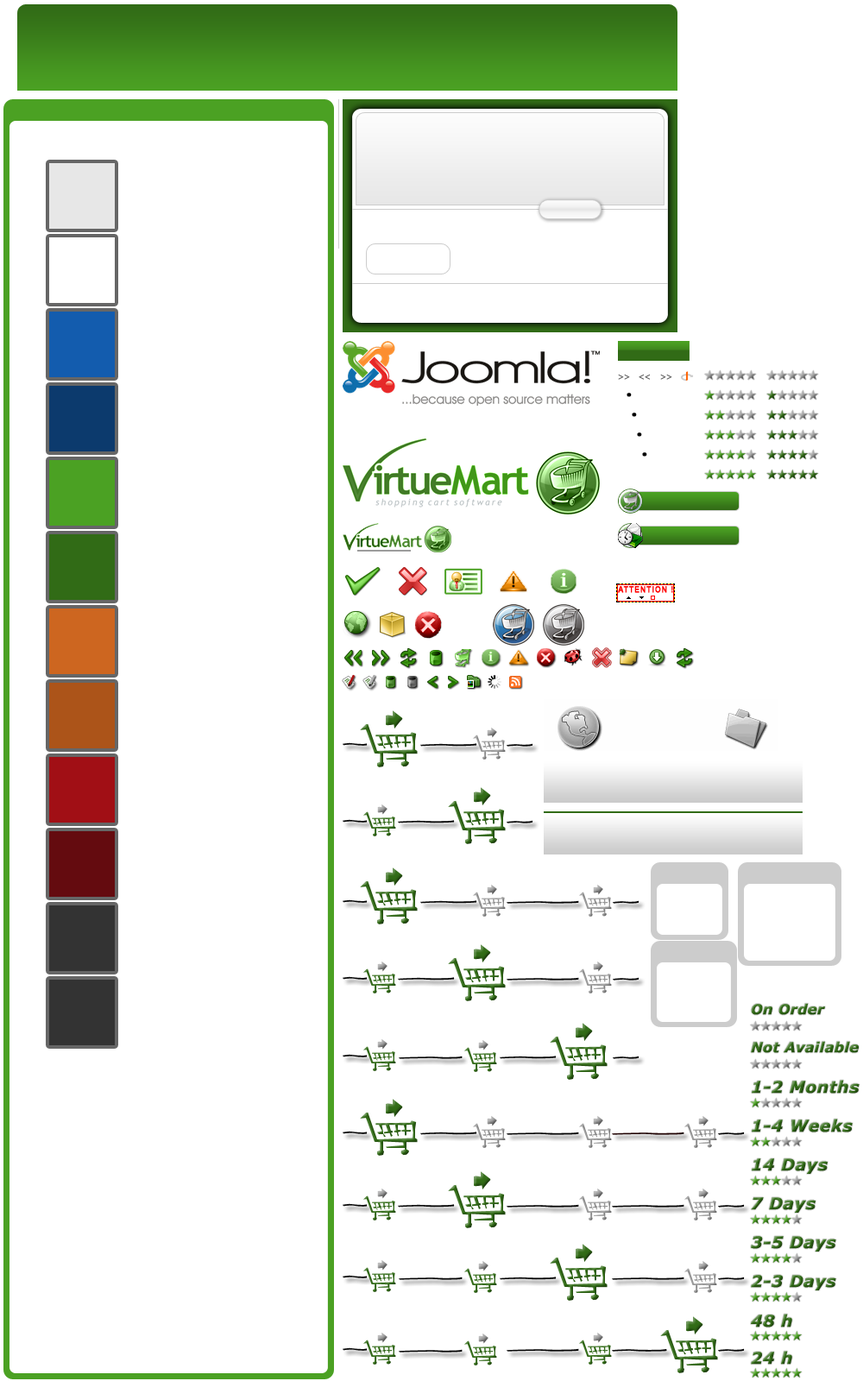
<style>
.page{position:relative;width:863px;height:1381px;background:#ffffff}
.page>*{position:absolute;margin:0}
.t1{font:8.6px "Tahoma";letter-spacing:-0.05em;color:#666666;font-weight:bold}
.t2{font:31.1px "Technic";letter-spacing:-0.05em;color:#000000;font-weight:bold}
.t3{font:13.8px "Verdana-BoldItalic";color:#316b16;font-weight:bold}
.t4{font:16.4px "Verdana-BoldItalic";font-weight:bold}
.t5{font:16.4px "Verdana-BoldItalic";color:#316b16;font-weight:bold}
</style>
<div class="page">
<p class="t1" style="left:618px;top:374px;width:12px;height:6px">&gt;&gt;</p>
<p class="t1" style="left:639px;top:374px;width:11px;height:6px;rotate:180deg">&gt;&gt;</p>
<p class="t1" style="left:660px;top:374px;width:13px;height:6px">&gt;&gt;</p>
<p class="t2" style="left:627px;top:393px;width:5px;height:4px">.</p>
<p class="t2" style="left:632px;top:413px;width:5px;height:4px">.</p>
<p class="t2" style="left:637px;top:433px;width:5px;height:4px">.</p>
<p class="t2" style="left:642px;top:452px;width:5px;height:5px">.</p>
<p class="t3" style="left:751px;top:1003px;width:74px;height:12px">On Order</p>
<p class="t3" style="left:751px;top:1041px;width:108px;height:12px">Not Available</p>
<p class="t4" style="left:752px;top:1080px;width:108px;height:14px">1-2 Months</p>
<p class="t5" style="left:752px;top:1119px;width:101px;height:14px">1-4 Weeks</p>
<p class="t4" style="left:752px;top:1159px;width:76px;height:15px">14 Days</p>
<p class="t4" style="left:751px;top:1197px;width:65px;height:16px">7 Days</p>
<p class="t5" style="left:751px;top:1236px;width:86px;height:16px">3-5 Days</p>
<p class="t4" style="left:751px;top:1275px;width:86px;height:16px">2-3 Days</p>
<p class="t4" style="left:751px;top:1314px;width:42px;height:14px">48 h</p>
<p class="t4" style="left:751px;top:1351px;width:42px;height:14px">24 h</p>
</div>
